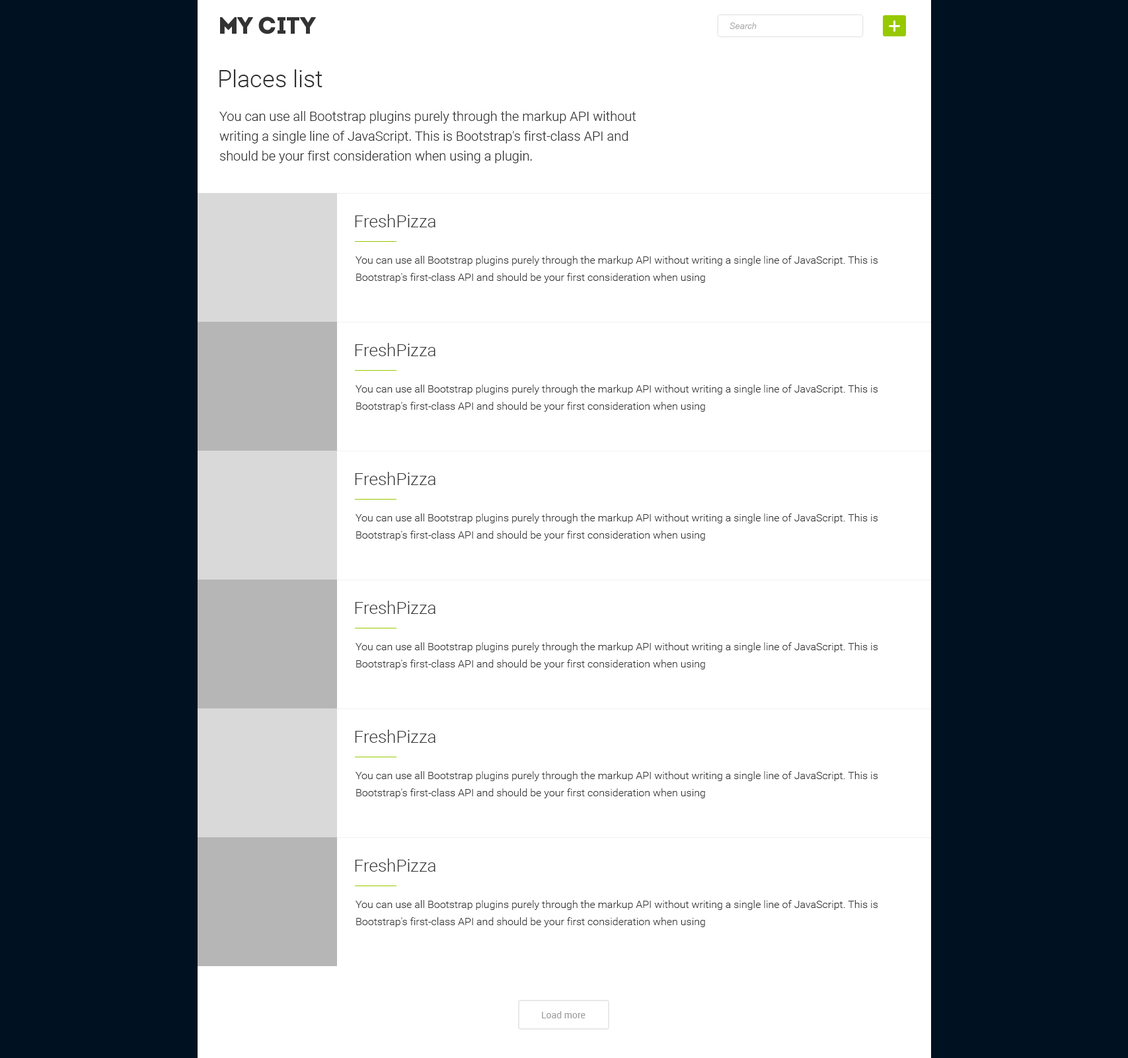
<style>
.page{position:relative;width:1128px;height:1058px;background:#ffffff}
.page>*{position:absolute;margin:0}
.t1{font:8.6px "Arial-ItalicMT";color:#acacac}
.t2{font:23.8px "Roboto-Light";color:#2f2f2f}
.t3{font:13.2px/19.8px "Roboto-Light";color:#2f2f2f}
.t4{font:17.2px "Roboto-Light";color:#333333}
.t5{font:10.6px/17.2px "Roboto-Light";color:#333333}
.t6{font:9.2px "Roboto-Regular";color:#9b9b9b}
</style>
<div class="page">
<p class="t1" style="left:729px;top:22px;width:27px;height:7px">Search</p>
<p class="t2" style="left:219px;top:69px;width:103px;height:18px">Places list</p>
<p class="t3" style="left:219px;top:111px;width:417px;height:52px">You can use all Bootstrap plugins purely through the markup API without writing a single line of JavaScript. This is Bootstrap's first-class API and should be your first consideration when using a plugin.</p>
<p class="t4" style="left:355px;top:214px;width:80px;height:13px">FreshPizza</p>
<p class="t5" style="left:355px;top:256px;width:523px;height:27px">You can use all Bootstrap plugins purely through the markup API without writing a single line of JavaScript. This is Bootstrap's first-class API and should be your first consideration when using</p>
<p class="t4" style="left:355px;top:343px;width:80px;height:13px">FreshPizza</p>
<p class="t5" style="left:355px;top:384px;width:523px;height:28px">You can use all Bootstrap plugins purely through the markup API without writing a single line of JavaScript. This is Bootstrap's first-class API and should be your first consideration when using</p>
<p class="t4" style="left:355px;top:472px;width:80px;height:13px">FreshPizza</p>
<p class="t5" style="left:355px;top:513px;width:523px;height:27px">You can use all Bootstrap plugins purely through the markup API without writing a single line of JavaScript. This is Bootstrap's first-class API and should be your first consideration when using</p>
<p class="t4" style="left:355px;top:600px;width:80px;height:14px">FreshPizza</p>
<p class="t5" style="left:355px;top:642px;width:523px;height:27px">You can use all Bootstrap plugins purely through the markup API without writing a single line of JavaScript. This is Bootstrap's first-class API and should be your first consideration when using</p>
<p class="t4" style="left:355px;top:729px;width:80px;height:13px">FreshPizza</p>
<p class="t5" style="left:355px;top:771px;width:523px;height:27px">You can use all Bootstrap plugins purely through the markup API without writing a single line of JavaScript. This is Bootstrap's first-class API and should be your first consideration when using</p>
<p class="t4" style="left:355px;top:858px;width:80px;height:13px">FreshPizza</p>
<p class="t5" style="left:355px;top:900px;width:523px;height:27px">You can use all Bootstrap plugins purely through the markup API without writing a single line of JavaScript. This is Bootstrap's first-class API and should be your first consideration when using</p>
<p class="t6" style="left:542px;top:1011px;width:43px;height:7px">Load more</p>
</div>
